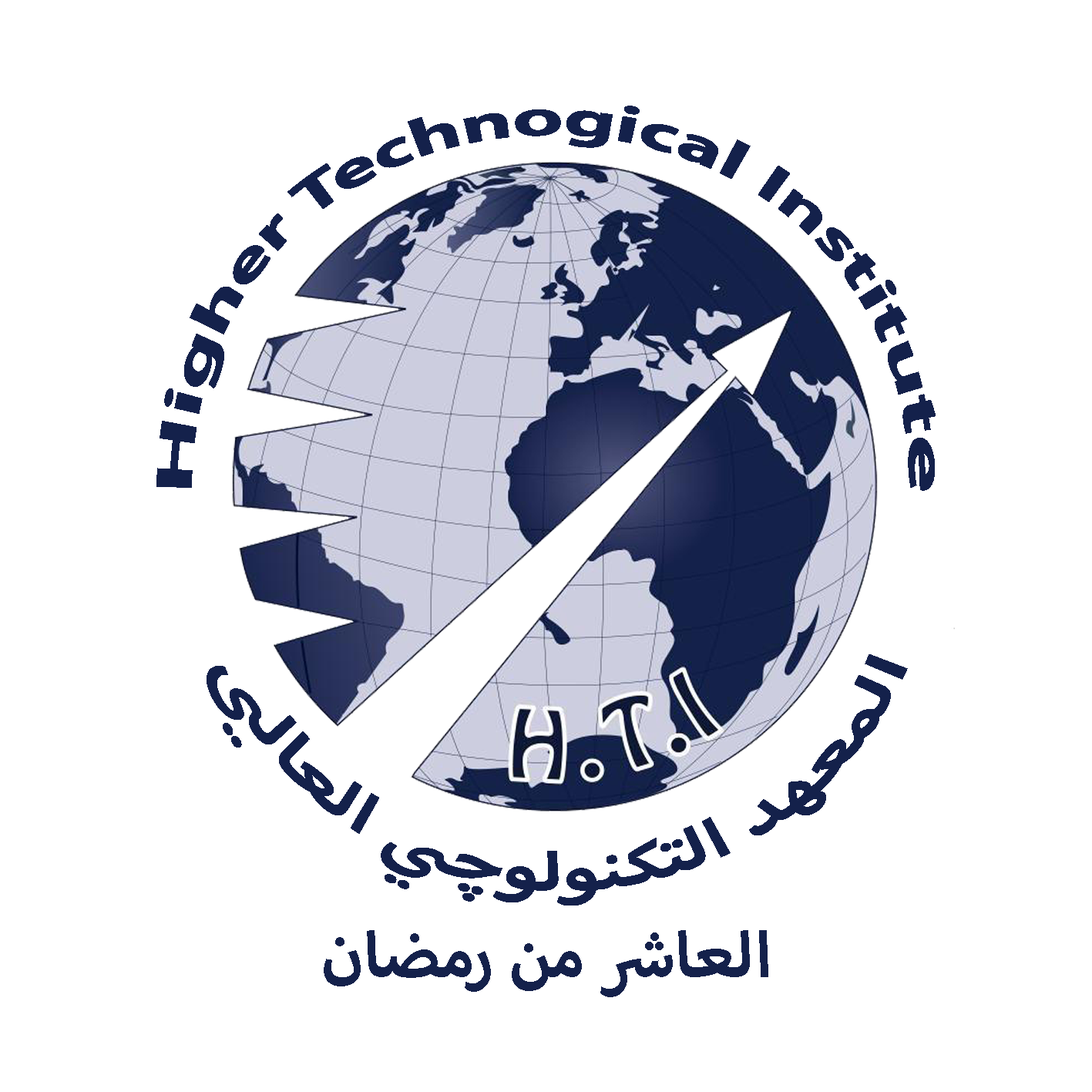
<style>
.page{position:relative;width:1092px;height:1092px;background:#ffffff}
.page>*{position:absolute;margin:0}
.t1{font:71.9px "MyriadArabic-Bold";color:#14214b}
.t2{font:77.1px "MyriadArabic-Bold";color:#14214b}
.t3{font:89.9px "MyriadArabic-Bold";color:#14214b}
</style>
<div class="page">
<p class="t1" style="left:156px;top:106px;width:780px;height:385px;text-align:center">Higher Technogical Institute</p>
<p class="t2" style="left:207px;top:654px;width:701px;height:251px;text-align:center">المعهد التكنولوچىي العاليى</p>
<p class="t3" style="left:324px;top:930px;width:444px;height:67px">العاشر من رمضان</p>
</div>
